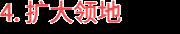
<style>
.page{position:relative;width:180px;height:34px;background:#000000}
.page>*{position:absolute;margin:0}
.t1{font:24px "WebPSD-18463539-0-Regular";color:#ef4b4b;font-weight:bold}
</style>
<div class="page">
<p class="t1" style="left:0px;top:0px;width:180px;height:34px">4. 扩大领地</p>
</div>
